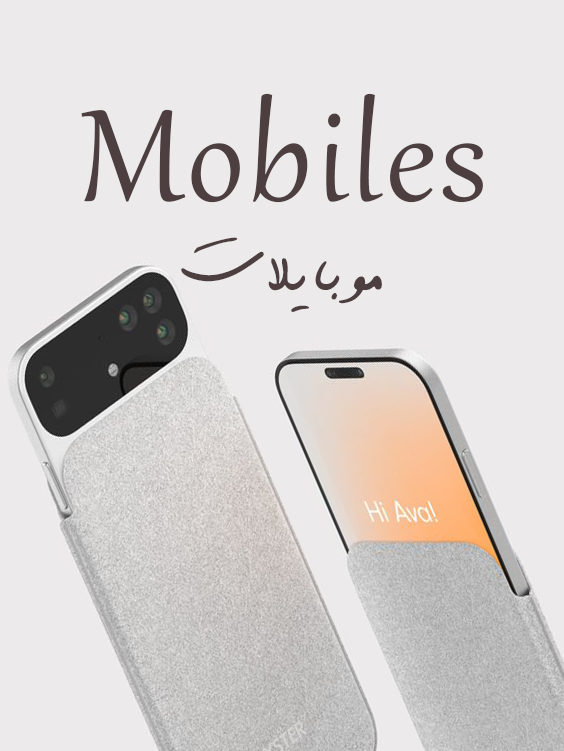
<style>
.page{position:relative;width:564px;height:751px;background:#eceaeb}
.page>*{position:absolute;margin:0}
.t1{font:160.4px "Gabriola";letter-spacing:0.025em;color:#4d3f3f}
.t2{font:87.3px "Sayeh-2";letter-spacing:0.025em;color:#4d3f3f}
</style>
<div class="page">
<p class="t1" style="left:81px;top:93px;width:402px;height:110px">Mobiles</p>
<p class="t2" style="left:181px;top:237px;width:201px;height:75px">موبايلات</p>
</div>
